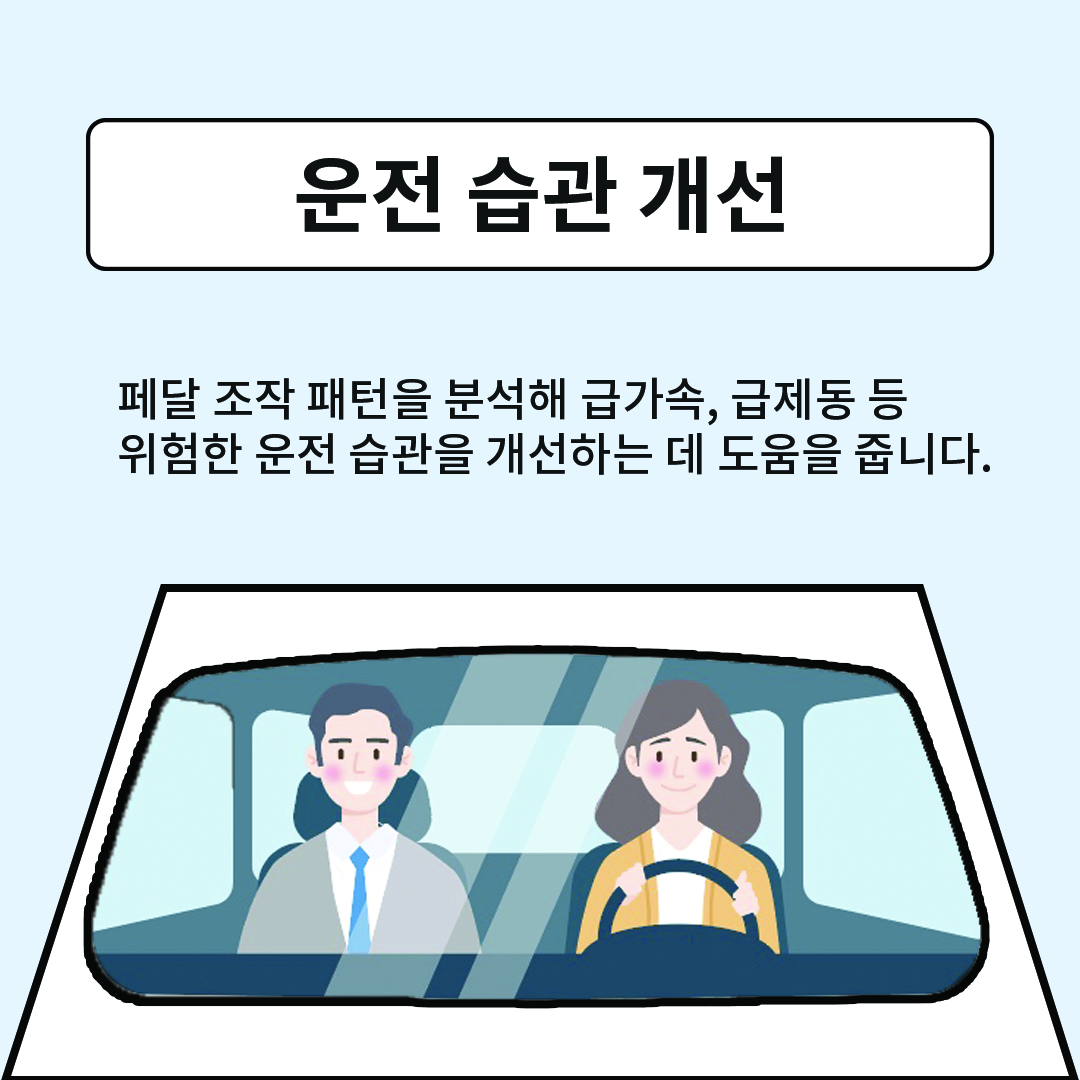
<style>
.page{position:relative;width:1080px;height:1080px;background:#e6f6ff}
.page>*{position:absolute;margin:0}
.t1{font:83.3px "NotoSansCJKkr-Bold";color:#0e1112}
.t2{font:45.8px "NotoSansCJKkr-Medium";color:#0e1112}
</style>
<div class="page">
<p class="t1" style="left:296px;top:156px;width:488px;height:77px">운전 습관 개선</p>
<p class="t2" style="left:119px;top:377px;width:871px;height:98px">페달 조작 패턴을 분석해 급가속, 급제동 등 <br>위험한 운전 습관을 개선하는 데 도움을 줍니다.</p>
</div>
